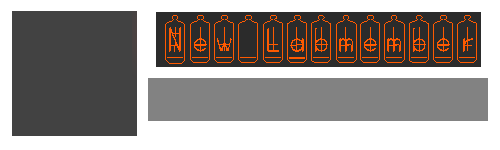
<style>
.page{position:relative;width:500px;height:150px;background:#ffffff}
.page>*{position:absolute;margin:0}
.t1{font:32px "BONX-TubeBold";color:#ff5a00}
</style>
<div class="page">
<p class="t1" style="left:165px;top:15px;width:312px;height:49px">New Labmember</p>
</div>
